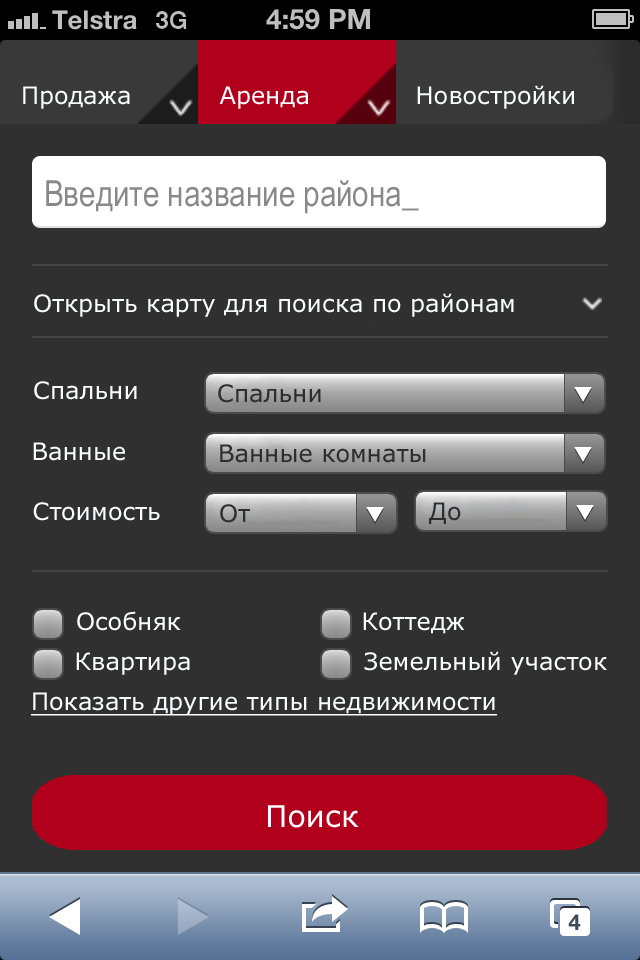
<style>
.page{position:relative;width:640px;height:960px;background:#303030}
.page>*{position:absolute;margin:0}
.t1{font:24px "Verdana";color:#fbfcfd}
.t2{font:36px "ArialNarrow";color:#888888}
.t3{font:24px "Verdana";color:#2e2e2e}
.t4{font:24px "Verdana";color:#fbfcfd;text-decoration:underline}
.t5{font:30px "Verdana";color:#ffffff}
</style>
<div class="page">
<p class="t1" style="left:23px;top:86px;width:107px;height:23px">Продажа</p>
<p class="t1" style="left:219px;top:86px;width:89px;height:23px">Аренда</p>
<p class="t1" style="left:417px;top:85px;width:157px;height:24px">Новостройки</p>
<p class="t2" style="left:46px;top:180px;width:373px;height:34px">Введите название района_</p>
<p class="t1" style="left:34px;top:293px;width:480px;height:24px">Открыть карту для поиска по районам</p>
<p class="t1" style="left:34px;top:381px;width:103px;height:19px">Спальни</p>
<p class="t3" style="left:218px;top:384px;width:103px;height:19px">Спальни</p>
<p class="t1" style="left:33px;top:442px;width:92px;height:19px">Ванные</p>
<p class="t3" style="left:220px;top:444px;width:206px;height:19px">Ванные комнаты</p>
<p class="t1" style="left:33px;top:502px;width:127px;height:19px">Стоимость</p>
<p class="t3" style="left:220px;top:504px;width:30px;height:19px">От</p>
<p class="t3" style="left:429px;top:502px;width:32px;height:22px">До</p>
<p class="t1" style="left:77px;top:611px;width:104px;height:20px">Особняк</p>
<p class="t1" style="left:363px;top:612px;width:102px;height:22px">Коттедж</p>
<p class="t1" style="left:76px;top:652px;width:114px;height:23px">Квартира</p>
<p class="t1" style="left:364px;top:651px;width:243px;height:24px">Земельный участок</p>
<p class="t4" style="left:31px;top:692px;width:466px;height:24px">Показать другие типы недвижимости</p>
<p class="t5" style="left:268px;top:805px;width:91px;height:23px">Поиск</p>
</div>
